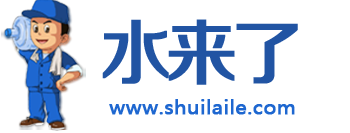
<style>
.page{position:relative;width:350px;height:133px;background:#ffffff}
.page>*{position:absolute;margin:0}
.t1{font:71.2px "FZZZHUNHJW--GB1-0";letter-spacing:-0.1em;color:#2154a3;font-weight:bold}
.t2{font:18.9px "MicrosoftYaHei";color:#1e67d0;font-weight:bold;scale:1.07 1}
</style>
<div class="page">
<p class="t1" style="left:102px;top:19px;width:196px;height:66px">水来了</p>
<p class="t2" style="left:109px;top:99px;width:186px;height:16px">www.shuilaile.com</p>
</div>
